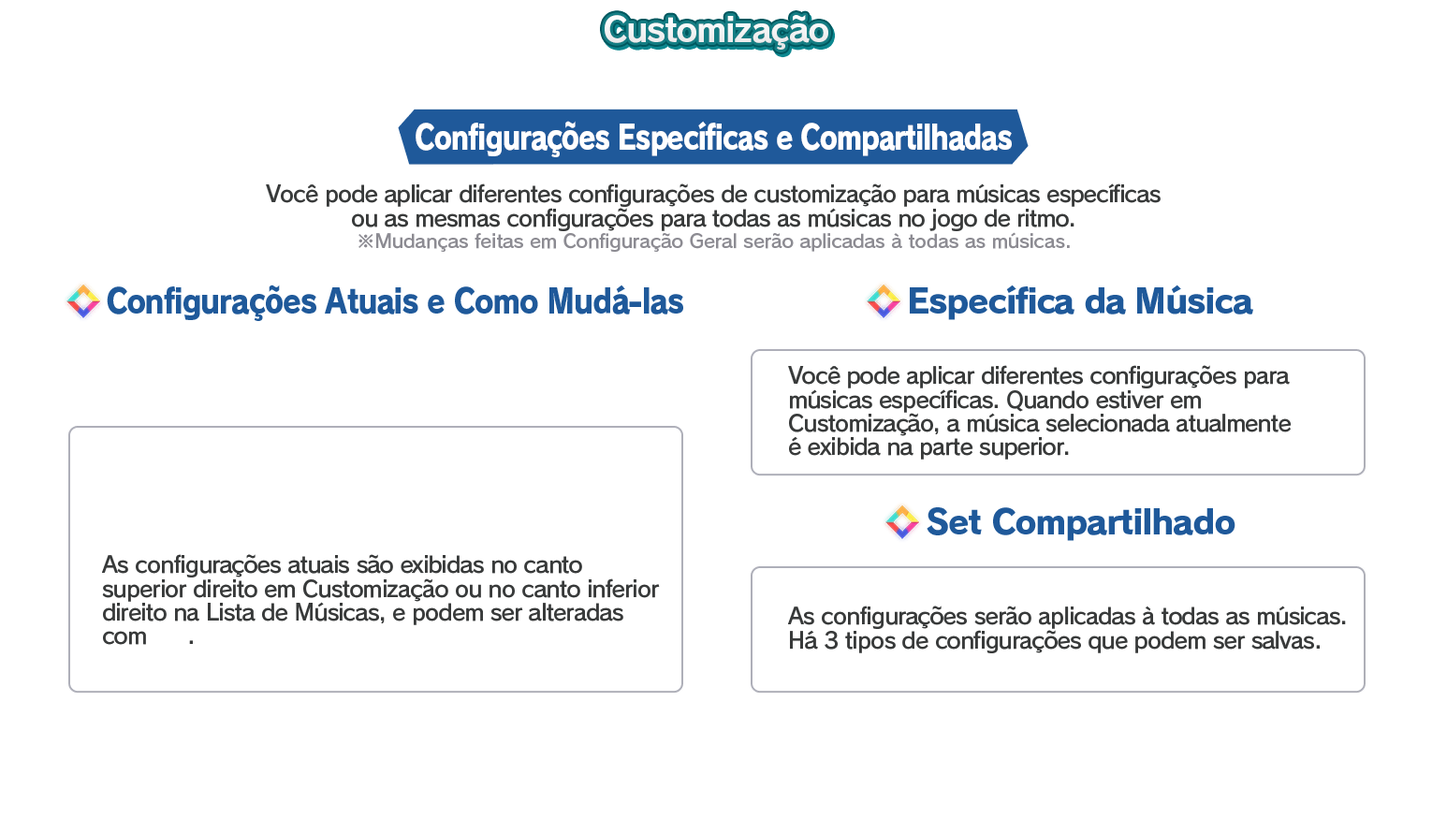
<style>
.page{position:relative;width:1432px;height:833px;background:#ffffff}
.page>*{position:absolute;margin:0}
.t1{font:33.7px "RodinPro-B";letter-spacing:-0.039em;color:#f2f3f3}
.t2{font:33.7px "RodinPro-EB";letter-spacing:-0.048em;color:#ffffff;scale:0.83 1}
.t3{font:22.5px/23.7px "RodinPro-DB";letter-spacing:-0.04em;color:#383a3a}
.t4{font:18.7px "RodinPro-DB";letter-spacing:-0.014em;color:#8c8b92}
.t5{font:33.7px "RodinPro-EB";letter-spacing:-0.04em;color:#1f599a;scale:0.88 1}
.t6{font:33.7px "RodinPro-EB";letter-spacing:-0.04em;color:#1f599a}
</style>
<div class="page">
<p class="t1" style="left:605px;top:15px;width:223px;height:35px">Customização</p>
<p class="t2" style="left:415px;top:121px;width:597px;height:36px">Configurações Específicas e Compartilhadas</p>
<p class="t3" style="left:266px;top:183px;width:894px;height:48px;text-align:center">Você pode aplicar diferentes configurações de customização para músicas específicas<br>ou as mesmas configurações para todas as músicas no jogo de ritmo.</p>
<p class="t4" style="left:358px;top:232px;width:712px;height:20px">※Mudanças feitas em Configuração Geral serão aplicadas à todas as músicas.</p>
<p class="t5" style="left:107px;top:284px;width:576px;height:37px">Configurações Atuais e Como Mudá-las</p>
<p class="t6" style="left:910px;top:284px;width:343px;height:36px">Específica da Música</p>
<p class="t3" style="left:788px;top:365px;width:503px;height:94px">Você pode aplicar diferentes configurações para<br>músicas específicas. Quando estiver em<br>Customização, a música selecionada atualmente<br>é exibida na parte superior.</p>
<p class="t6" style="left:926px;top:507px;width:309px;height:34px">Set Compartilhado</p>
<p class="t3" style="left:102px;top:554px;width:558px;height:91px">As configurações atuais são exibidas no canto<br>superior direito em Customização ou no canto inferior<br>direito na Lista de Músicas, e podem ser alteradas<br>com      .</p>
<p class="t3" style="left:788px;top:605px;width:558px;height:48px">As configurações serão aplicadas à todas as músicas.<br>Há 3 tipos de configurações que podem ser salvas.</p>
</div>
